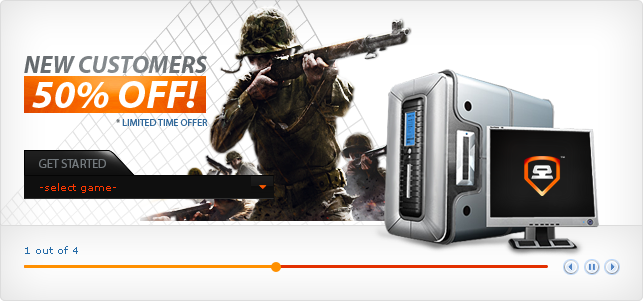
<style>
.page{position:relative;width:643px;height:301px}
.page>*{position:absolute;margin:0}
.t1{font:24px "MyriadPro-BoldIt";color:#73797d}
.t2{font:40px "MyriadPro-BoldIt";color:#ffffff}
.t3{font:10px "MyriadPro-Regular";color:#346b9c;text-transform:uppercase}
.t4{font:10px "MyriadPro-Regular";color:#73797d;text-transform:uppercase}
.t5{font:12px "MyriadPro-Regular";color:#73797d}
.t6{font:10px "Verdana";color:#ff3800}
.t7{font:10px "Verdana";color:#276ca8}
</style>
<div class="page">
<p class="t1" style="left:24px;top:56px;width:183px;height:17px">NEW CUSTOMERS</p>
<p class="t2" style="left:32px;top:81px;width:166px;height:27px">50% OFF!</p>
<p class="t3" style="left:116px;top:119px;width:92px;height:7px"><span class="t4">* </span>limited time offer</p>
<p class="t5" style="left:39px;top:159px;width:67px;height:9px">GET STARTED</p>
<p class="t6" style="left:40px;top:183px;width:76px;height:10px">-select game-</p>
<p class="t7" style="left:25px;top:246px;width:53px;height:8px">1 out of 4</p>
</div>
